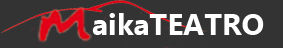
<style>
.page{position:relative;width:283px;height:48px;background:#333333}
.page>*{position:absolute;margin:0}
.t1{font:30px "Ebrima-Bold";color:#ffffff}
</style>
<div class="page">
<p class="t1" style="left:92px;top:13px;width:172px;height:22px">aikaTEATRO</p>
</div>
